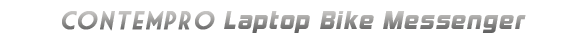
<style>
.page{position:relative;width:580px;height:43px;background:#ffffff}
.page>*{position:absolute;margin:0}
.t1{font:24px "KimberleyBl-Regular";letter-spacing:0.05em;font-style:italic}
.t2{font:25px "MarketDeco";letter-spacing:0.05em;font-weight:bold;font-style:italic}
</style>
<div class="page">
<p class="t1" style="left:62px;top:10px;width:464px;height:23px"><span class="t2">ContemPRO</span> Laptop Bike Messenger</p>
</div>
